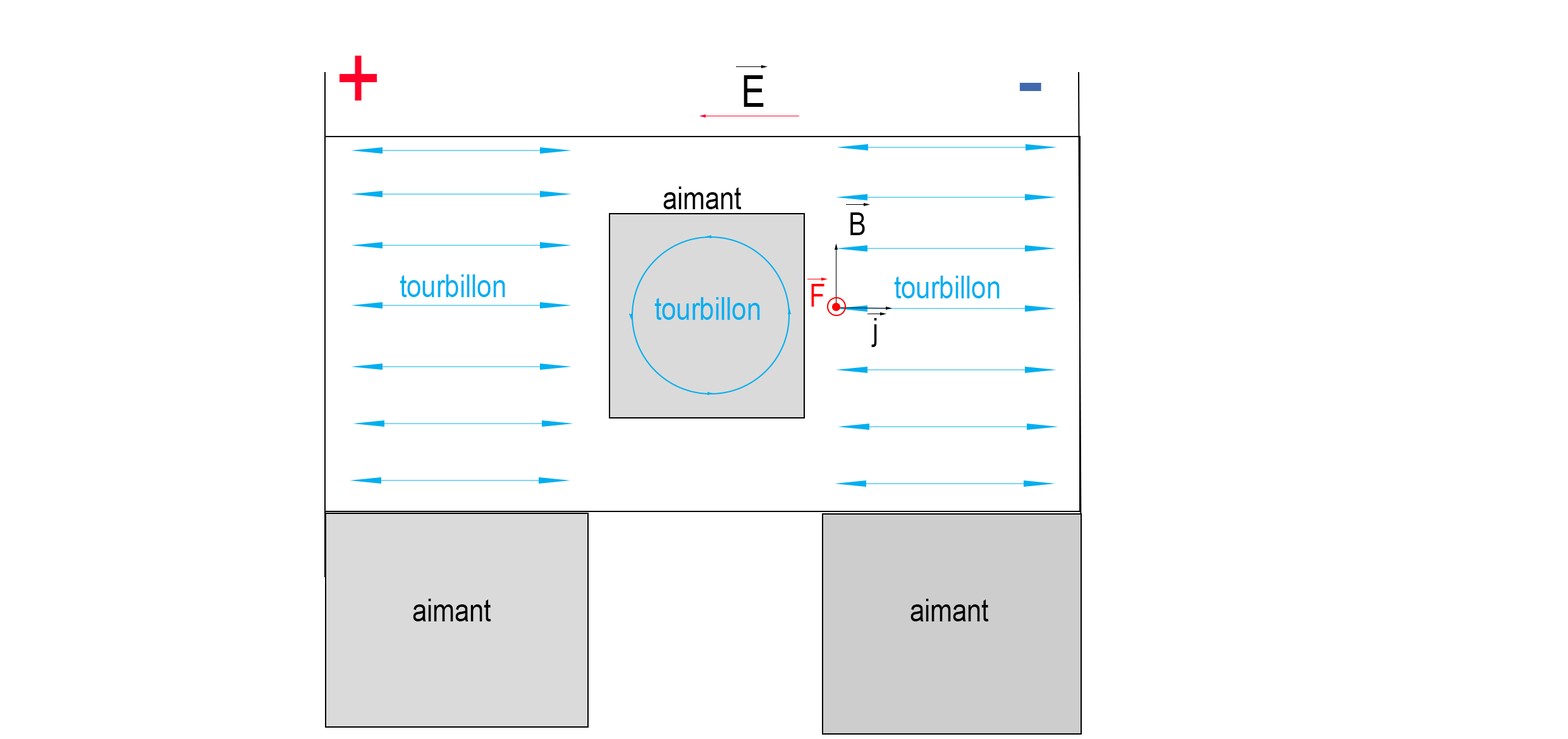
<style>
.page{position:relative;width:1568px;height:739px;background:#ffffff}
.page>*{position:absolute;margin:0}
.t1{font:94.8px "ArialMT";color:#ff002a;scale:0.83 1}
.t2{font:44.3px "ArialMT";color:#000000;scale:0.83 1}
.t3{font:94.8px "ArialMT";color:#416aae;scale:0.83 1}
.t4{font:31.6px "ArialMT";color:#000000;scale:0.83 1}
.t5{font:31.6px "ArialMT";color:#00aeef;scale:0.83 1}
.t6{font:31.6px "ArialMT";color:#ff0000;scale:0.83 1}
</style>
<div class="page">
<p class="t1" style="left:339px;top:56px;width:38px;height:45px">+</p>
<p class="t2" style="left:744px;top:75px;width:20px;height:32px">E</p>
<p class="t3" style="left:1019px;top:83px;width:22px;height:8px">-</p>
<p class="t4" style="left:663px;top:187px;width:79px;height:22px">aimant</p>
<p class="t4" style="left:850px;top:212px;width:15px;height:23px">B</p>
<p class="t5" style="left:400px;top:274px;width:105px;height:23px">tourbillon</p>
<p class="t5" style="left:894px;top:276px;width:106px;height:22px">tourbillon</p>
<p class="t6" style="left:811px;top:284px;width:13px;height:23px">F</p>
<p class="t5" style="left:654px;top:297px;width:106px;height:23px">tourbillon</p>
<p class="t4" style="left:871px;top:318px;width:6px;height:29px">j</p>
<p class="t4" style="left:413px;top:599px;width:78px;height:23px">aimant</p>
<p class="t4" style="left:910px;top:599px;width:79px;height:23px">aimant</p>
</div>
